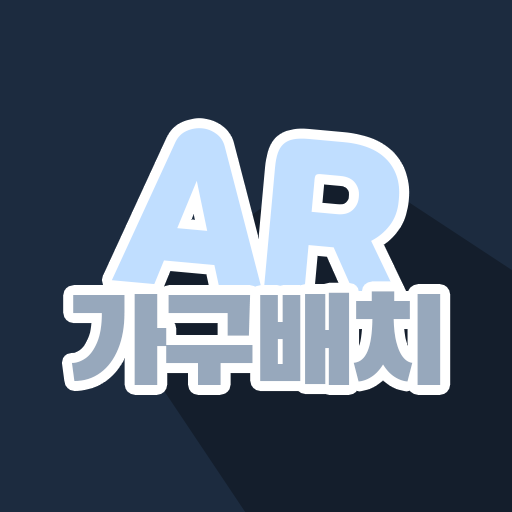
<style>
.page{position:relative;width:512px;height:512px;background:#1c2b3f}
.page>*{position:absolute;margin:0}
.t1{font:197.1px "Jalnan";letter-spacing:-0.05em;color:#c0deff}
.t2{font:120.1px "BlackHanSans-Regular";letter-spacing:-0.06em;color:#97a8bc}
</style>
<div class="page">
<p class="t1" style="left:111px;top:128px;width:292px;height:179px;rotate:5deg">AR</p>
<p class="t2" style="left:71px;top:291px;width:370px;height:94px">가구배치</p>
</div>
